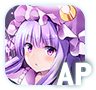
<style>
.page{position:relative;width:96px;height:90px}
.page>*{position:absolute;margin:0}
.t1{font:36px "Inconsolata-Black";color:#ffffff}
</style>
<div class="page">
<p class="t1" style="left:56px;top:62px;width:36px;height:24px">AP</p>
</div>
